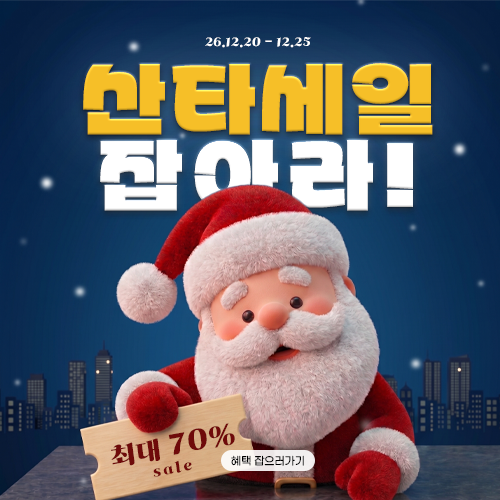
<style>
.page{position:relative;width:500px;height:500px}
.page>*{position:absolute;margin:0}
.t1{font:12px "ghanachoco";letter-spacing:0.04em;color:#ffffff}
.t2{font:75.8px "Partial-Sans-KR";letter-spacing:0.06em;color:#f6bf28}
.t3{font:75.8px "Partial-Sans-KR";letter-spacing:0.14em;color:#ffffff}
.t4{font:28.7px "ghanachoco";letter-spacing:0.04em;color:#6f0a0a}
.t5{font:25px "ghanachoco";letter-spacing:0.04em;color:#6f0a0a}
.t6{font:14.1px "ghanachoco";letter-spacing:0.16em;color:#6f0a0a}
</style>
<div class="page">
<p class="t1" style="left:205px;top:37px;width:106px;height:11px">26.12.20 - 12.25</p>
<p class="t2" style="left:83px;top:63px;width:350px;height:72px">산타세일</p>
<p class="t3" style="left:100px;top:140px;width:313px;height:71px">잡아라!</p>
<p class="t4" style="left:111px;top:423px;width:124px;height:43px;rotate:-10deg"><span class="t5">최대</span> 70%</p>
<p class="t6" style="left:153px;top:460px;width:39px;height:17px;rotate:-12deg">sale</p>
</div>
